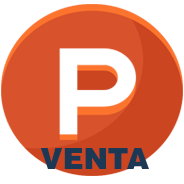
<style>
.page{position:relative;width:184px;height:184px;background:#ffffff}
.page>*{position:absolute;margin:0}
.t1{font:29.3px "HelveticaLTStd-Blk";color:#1b3954}
</style>
<div class="page">
<p class="t1" style="left:40px;top:148px;width:109px;height:21px">VENTA</p>
</div>
